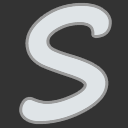
<style>
.page{position:relative;width:128px;height:128px;background:#333333}
.page>*{position:absolute;margin:0}
.t1{font:150px "SegoePrint-Bold";color:#dfe4e7}
</style>
<div class="page">
<p class="t1" style="left:22px;top:6px;width:87px;height:115px">S</p>
</div>
